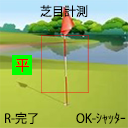
<style>
.page{position:relative;width:128px;height:128px}
.page>*{position:absolute;margin:0}
.t1{font:12.3px "KozGoPr6N-Regular";color:#000000}
</style>
<div class="page">
<p class="t1" style="left:40px;top:5px;width:48px;height:12px">芝目計測</p>
<p class="t1" style="left:5px;top:112px;width:33px;height:12px">R-完了</p>
<p class="t1" style="left:76px;top:112px;width:50px;height:12px">OK-ｼｬｯﾀｰ</p>
</div>
